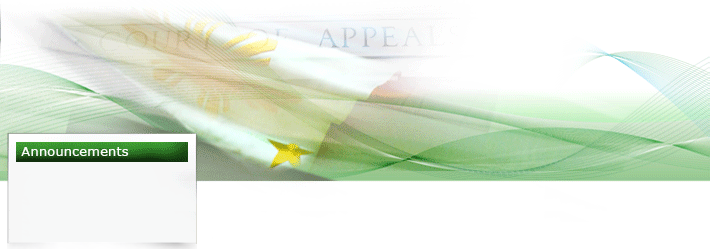
<style>
.page{position:relative;width:710px;height:249px;background:#ffffff}
.page>*{position:absolute;margin:0}
.t1{font:13.3px "Verdana";color:#fafcf9}
</style>
<div class="page">
<p class="t1" style="left:21px;top:147px;width:108px;height:9px">Announcements</p>
</div>
